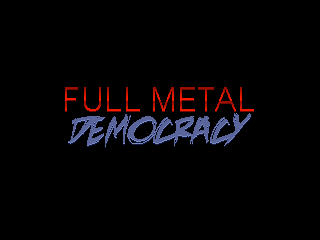
<style>
.page{position:relative;width:320px;height:240px;background:#000000}
.page>*{position:absolute;margin:0}
.t1{font:50px "CordiaNew";text-transform:uppercase}
.t2{font:48px "DeathRattleBB";color:#5a669b;text-transform:uppercase}
</style>
<div class="page">
<p class="t1" style="left:65px;top:87px;width:189px;height:24px">FULL METAL</p>
<p class="t2" style="left:68px;top:113px;width:183px;height:34px">DEMOCRACY</p>
</div>
